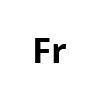
<style>
.page{position:relative;width:100px;height:100px;background:#ffffff}
.page>*{position:absolute;margin:0}
.t1{font:35px "OpenSans-Bold";color:#000000}
</style>
<div class="page">
<p class="t1" style="left:35px;top:38px;width:32px;height:25px">Fr</p>
</div>
